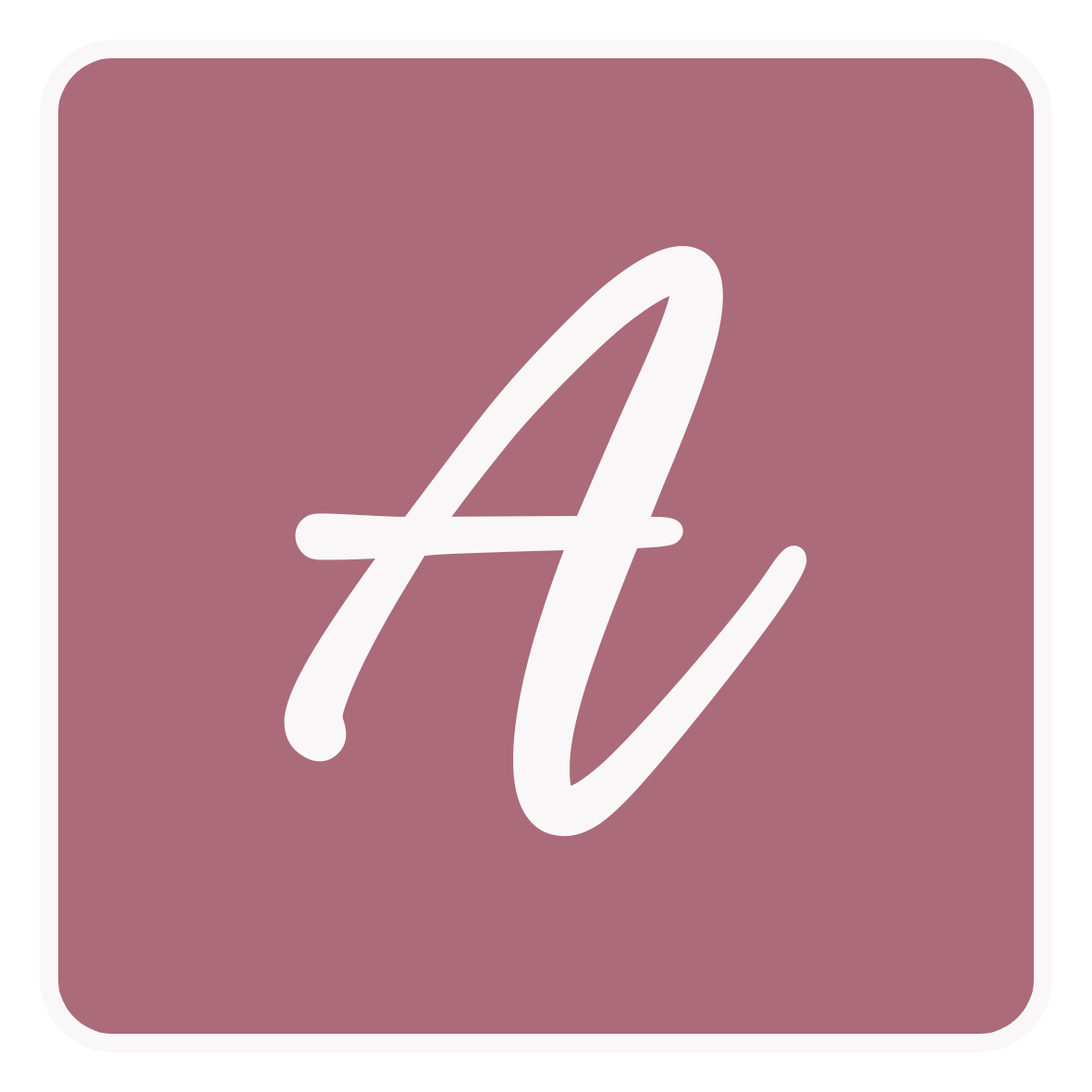
<style>
.page{position:relative;width:1092px;height:1092px;background:#ab6b7b}
.page>*{position:absolute;margin:0}
.t1{font:868.8px "Solitude";color:#f9f7f7;font-weight:bold}
</style>
<div class="page">
<p class="t1" style="left:284px;top:246px;width:523px;height:591px">A</p>
</div>
